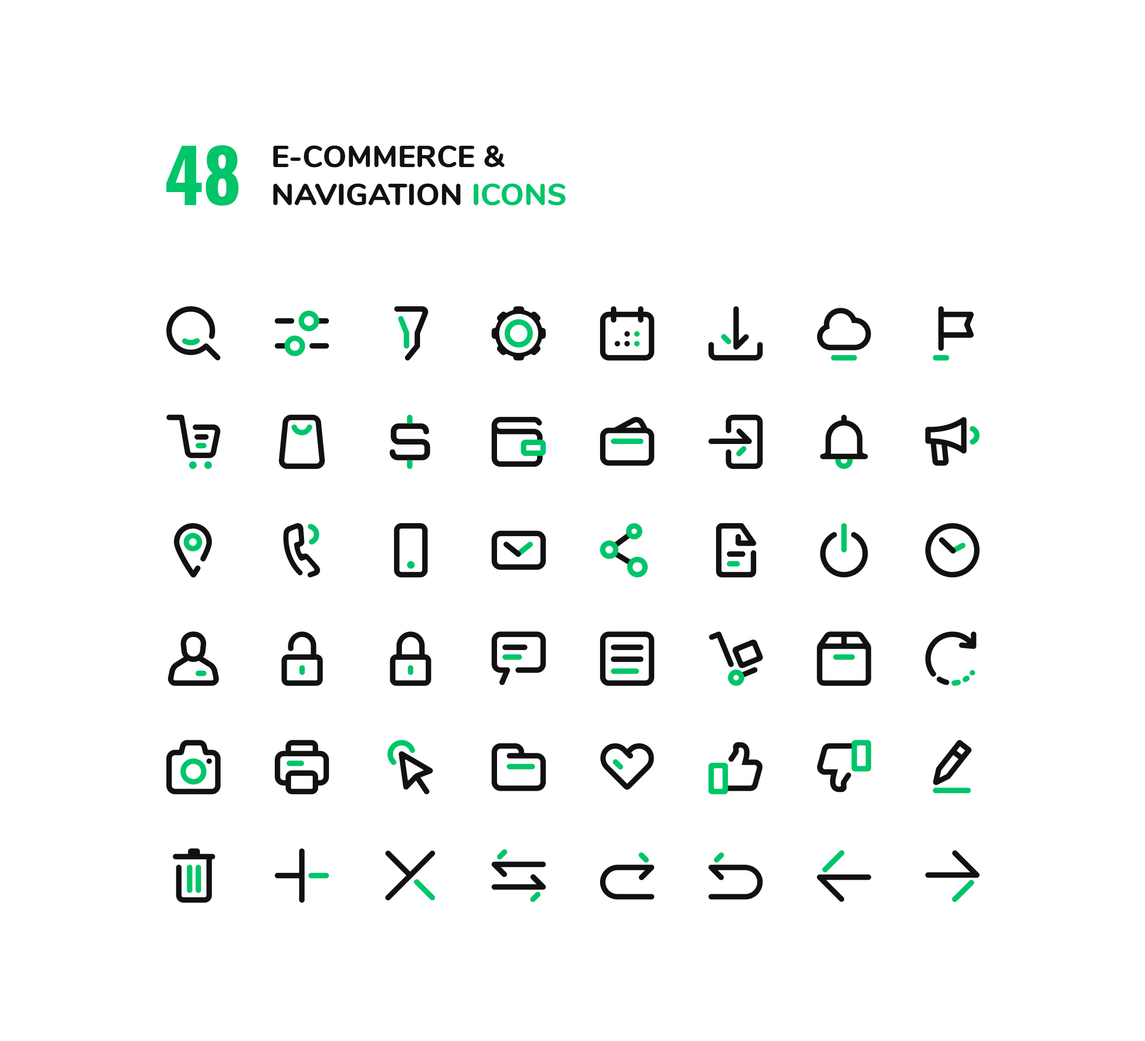
<style>
.page{position:relative;width:1145px;height:1041px;background:#ffffff}
.page>*{position:absolute;margin:0}
.t1{font:73.7px "Oswald-Bold";color:#00c569}
.t2{font:30.4px/38px "Nunito-ExtraBold";color:#111111}
.t3{font:30.4px/38px "Nunito-ExtraBold";color:#00c569}
</style>
<div class="page">
<p class="t1" style="left:166px;top:145px;width:73px;height:61px">48</p>
<p class="t2" style="left:273px;top:145px;width:293px;height:61px">E-COMMERCE &amp; <br>NAVIGATION <span class="t3">ICONS</span></p>
</div>
